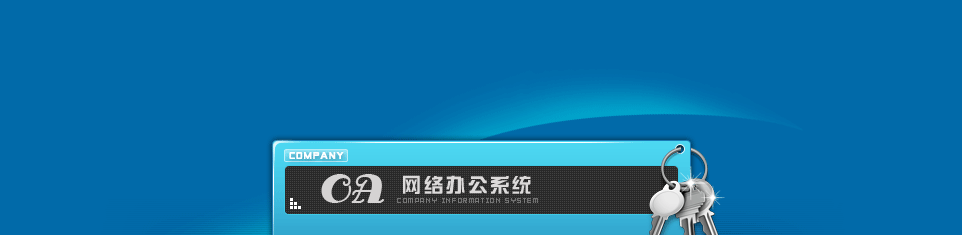
<style>
.page{position:relative;width:962px;height:235px;background:#016aa9}
.page>*{position:absolute;margin:0}
.t1{font:40px "AntsyPants";color:#d5d3d3}
.t2{font:20px "FZZYJW--GB1-0";letter-spacing:0.1em;color:#dcdada}
</style>
<div class="page">
<p class="t1" style="left:321px;top:174px;width:63px;height:29px">OA</p>
<p class="t2" style="left:403px;top:175px;width:128px;height:19px">网络办公系统</p>
</div>
